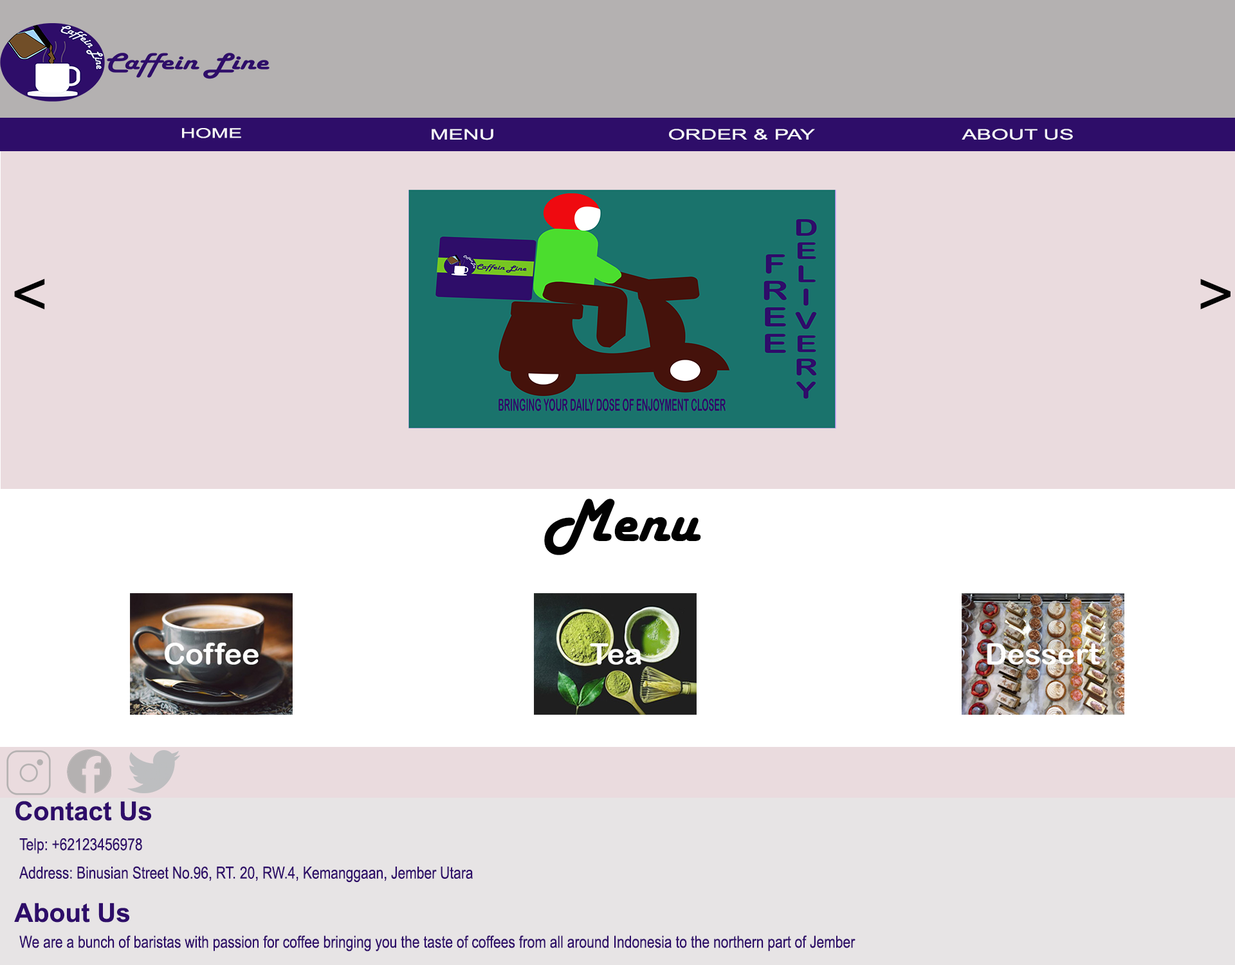
<style>
.page{position:relative;width:1235px;height:965px;background:#eadbde}
.page>*{position:absolute;margin:0}
.t1{font:13.4px "ArialNarrow";color:#f7f6f9;scale:1.86 1}
.t2{font:14.4px "ArialNarrow";color:#f7f6f9;scale:1.86 1}
.t3{font:62.6px "ArialMT";color:#020202}
.t4{font:62.6px "HarlowSolid";color:#020202}
.t5{font:26.2px "Arial-BoldMT";color:#2e0d69}
.t6{font:16.5px "ArialNarrow";color:#2e0d69}
</style>
<div class="page">
<p class="t1" style="left:182px;top:128px;width:59px;height:10px">HOME</p>
<p class="t2" style="left:432px;top:129px;width:62px;height:11px">MENU</p>
<p class="t2" style="left:669px;top:129px;width:146px;height:11px">ORDER &amp; PAY</p>
<p class="t2" style="left:962px;top:129px;width:111px;height:11px">ABOUT US</p>
<p class="t3" style="left:14px;top:279px;width:31px;height:31px">&lt;</p>
<p class="t3" style="left:1201px;top:279px;width:30px;height:31px">&gt;</p>
<p class="t4" style="left:544px;top:499px;width:157px;height:56px">Menu</p>
<p class="t5" style="left:15px;top:801px;width:136px;height:20px">Contact Us</p>
<p class="t6" style="left:19px;top:838px;width:123px;height:16px">Telp: +62123456978</p>
<p class="t6" style="left:19px;top:866px;width:454px;height:17px">Address: Binusian Street No.96, RT. 20, RW.4, Kemanggaan, Jember Utara</p>
<p class="t5" style="left:14px;top:903px;width:116px;height:20px">About Us</p>
<p class="t6" style="left:19px;top:936px;width:837px;height:16px">We are a bunch of baristas with passion for coffee bringing you the taste of coffees from all around Indonesia to the northern part of Jember</p>
</div>
